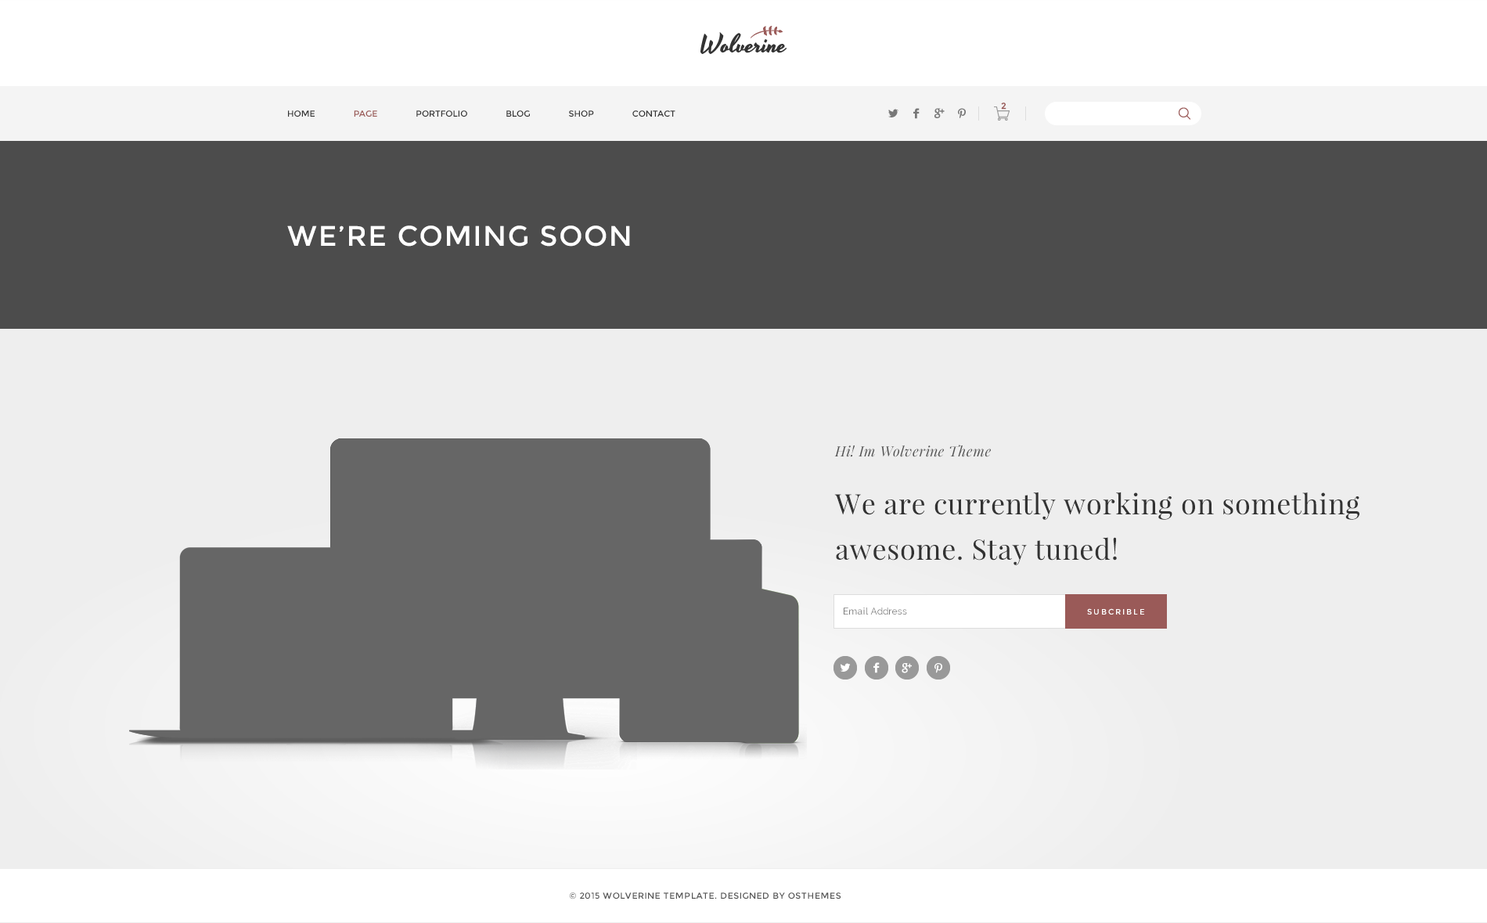
<style>
.page{position:relative;width:1487px;height:923px;background:#eeeeee}
.page>*{position:absolute;margin:0}
.t1{font:8.6px "Montserrat-Regular";color:#333333}
.t2{font:8.6px "Montserrat-Regular";color:#9b5a57}
.t3{font:8.6px "Montserrat-Regular";color:#9a5a58;font-weight:bold}
.t4{font:28.2px "Montserrat-Regular";letter-spacing:0.05em;color:#ffffff}
.t5{font:14.1px "PlayfairDisplay-Italic";letter-spacing:0.02em;color:#535353}
.t6{font:28.2px/45.1px "PlayfairDisplay-Regular";letter-spacing:0.02em;color:#333333}
.t7{font:9.4px "Raleway";letter-spacing:0.02em;color:#777777}
.t8{font:7.8px "Montserrat-Regular";letter-spacing:0.2em;color:#ffffff}
.t9{font:8.6px "Montserrat-Regular";letter-spacing:0.05em;color:#555555}
</style>
<div class="page">
<p class="t1" style="left:288px;top:110px;width:387px;height:7px">HOME      <span class="t2">PAGE</span>      PORTFOLIO      BLOG      SHOP      CONTACT</p>
<p class="t3" style="left:1001px;top:103px;width:5px;height:7px">2</p>
<p class="t4" style="left:287px;top:225px;width:343px;height:22px">WE’RE COMING SOON</p>
<p class="t5" style="left:834px;top:445px;width:157px;height:12px">Hi! Im Wolverine Theme</p>
<p class="t6" style="left:834px;top:491px;width:525px;height:74px">We are currently working on something awesome. Stay tuned!</p>
<p class="t7" style="left:844px;top:607px;width:63px;height:7px">Email Address</p>
<p class="t8" style="left:1087px;top:608px;width:57px;height:6px">SUBCRIBLE</p>
<p class="t9" style="left:569px;top:892px;width:272px;height:7px">© 2015 WOLVERINE TEMPLATE. DESIGNED BY OSTHEMES</p>
</div>
